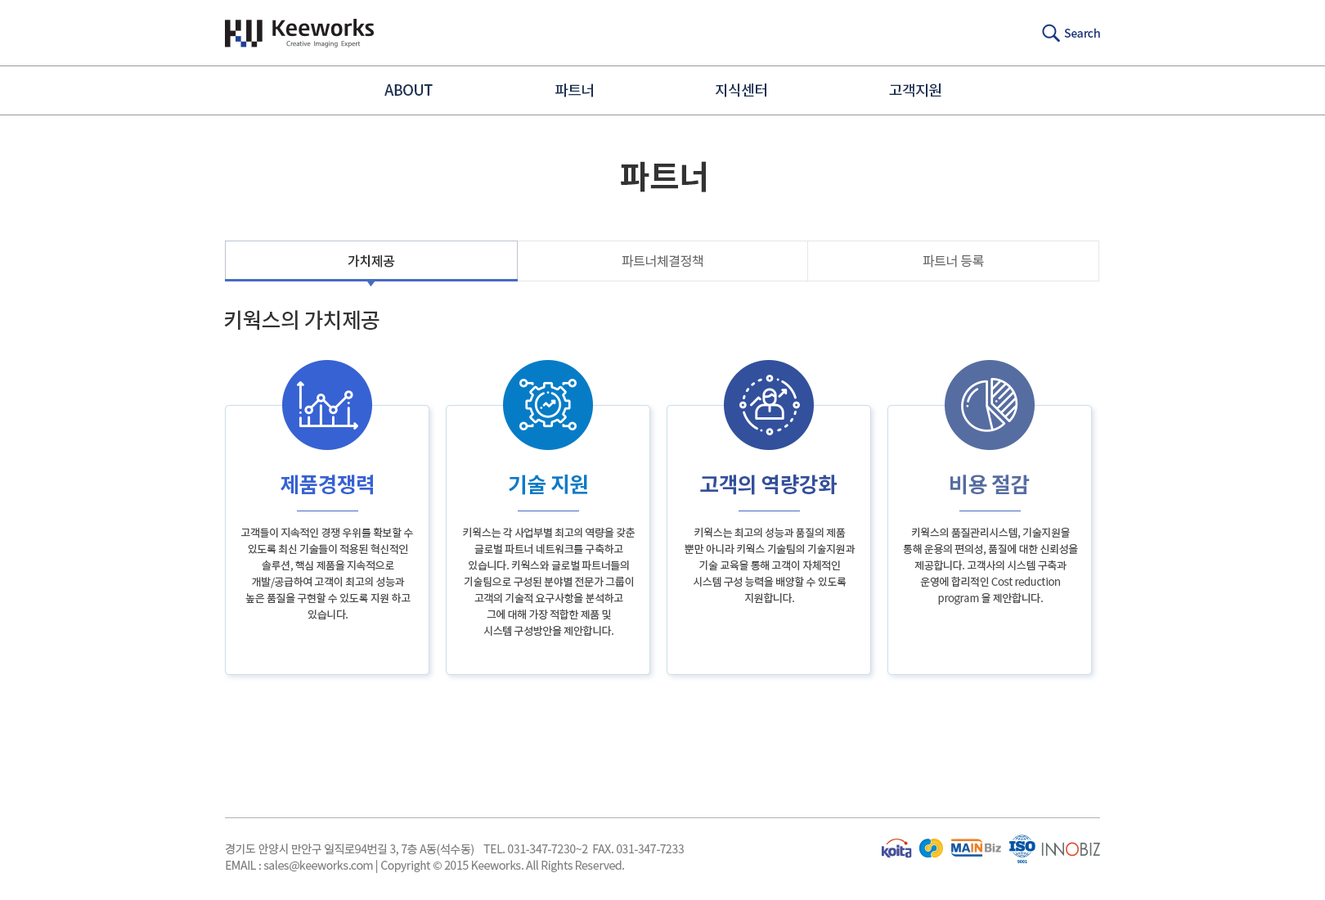
<style>
.page{position:relative;width:1325px;height:900px;background:#ffffff}
.page>*{position:absolute;margin:0}
.t1{font:11.5px "NotoSansCJKkr-Medium";letter-spacing:-0.025em;color:#1b3780}
.t2{font:14.7px "NotoSansCJKkr-Medium";letter-spacing:-0.025em;color:#1c3053;text-transform:uppercase}
.t3{font:32.7px "NotoSansCJKkr-Bold";letter-spacing:-0.025em;color:#333333}
.t4{font:13.1px "NotoSansCJKkr-Medium";letter-spacing:-0.025em;color:#333333}
.t5{font:13.1px "NotoSansCJKkr-DemiLight";letter-spacing:-0.025em;color:#666666}
.t6{font:21.3px "NotoSansCJKkr-Medium";letter-spacing:-0.025em;color:#333333}
.t7{font:21.3px "NotoSansCJKkr-Bold";letter-spacing:-0.025em;color:#3762d3}
.t8{font:21.3px "NotoSansCJKkr-Bold";letter-spacing:-0.025em;color:#067cc7}
.t9{font:21.3px "NotoSansCJKkr-Bold";letter-spacing:-0.025em;color:#33509c}
.t10{font:21.3px "NotoSansCJKkr-Bold";letter-spacing:-0.025em;color:#566da1}
.t11{font:10.6px/16.4px "NotoSansCJKkr-Regular";letter-spacing:-0.025em;color:#4d4d4d}
.t12{font:11.5px/16.4px "NotoSansCJKkr-Regular";letter-spacing:-0.025em;color:#808080}
</style>
<div class="page">
<p class="t1" style="left:1064px;top:28px;width:36px;height:10px">Search</p>
<p class="t2" style="left:384px;top:84px;width:49px;height:12px">ABOUT</p>
<p class="t2" style="left:555px;top:83px;width:38px;height:14px">파트너</p>
<p class="t2" style="left:715px;top:83px;width:51px;height:14px">지식센터</p>
<p class="t2" style="left:889px;top:83px;width:53px;height:14px">고객지원</p>
<p class="t3" style="left:621px;top:161px;width:85px;height:31px">파트너</p>
<p class="t4" style="left:348px;top:254px;width:47px;height:13px">가치제공</p>
<p class="t5" style="left:622px;top:254px;width:81px;height:13px">파트너체결정책</p>
<p class="t5" style="left:923px;top:254px;width:61px;height:13px">파트너 등록</p>
<p class="t6" style="left:224px;top:310px;width:156px;height:20px">키웍스의 가치제공</p>
<p class="t7" style="left:281px;top:474px;width:92px;height:21px">제품경쟁력</p>
<p class="t8" style="left:509px;top:474px;width:78px;height:21px">기술 지원</p>
<p class="t9" style="left:700px;top:474px;width:137px;height:21px">고객의 역량강화</p>
<p class="t10" style="left:951px;top:474px;width:79px;height:21px">비용 절감</p>
<p class="t11" style="left:240px;top:527px;width:173px;height:92px;text-align:center">고객들이 지속적인 경쟁 우위를 확보할 수 <br>있도록 최신 기술들이 적용된 혁신적인<br>솔루션, 핵심 제품을 지속적으로<br>개발/공급하여 고객이 최고의 성능과<br>높은 품질을 구현할 수 있도록 지원 하고<br>있습니다.</p>
<p class="t11" style="left:463px;top:527px;width:172px;height:109px;text-align:center">키웍스는 각 사업부별 최고의 역량을 갖춘<br>글로벌 파트너 네트워크를 구축하고<br>있습니다. 키웍스와 글로벌 파트너들의<br>기술팀으로 구성된 분야별 전문가 그룹이<br>고객의 기술적 요구사항을 분석하고<br>그에 대해 가장 적합한 제품 및<br>시스템 구성방안을 제안합니다.</p>
<p class="t11" style="left:685px;top:527px;width:171px;height:76px;text-align:center">키웍스는 최고의 성능과 품질의 제품<br>뿐만 아니라 키웍스 기술팀의 기술지원과<br>기술 교육을 통해 고객이 자체적인<br>시스템 구성 능력을 배양할 수 있도록<br>지원합니다.</p>
<p class="t11" style="left:903px;top:527px;width:175px;height:78px;text-align:center">키웍스의 품질관리시스템, 기술지원을<br>통해 운용의 편의성, 품질에 대한 신뢰성을<br>제공합니다. 고객사의 시스템 구축과<br>운영에 합리적인 Cost reduction<br>program 을 제안합니다.</p>
<p class="t12" style="left:226px;top:843px;width:458px;height:30px">경기도 안양시 만안구 일직로94번길 3, 7층 A동(석수동)    TEL. 031-347-7230~2  FAX. 031-347-7233<br>EMAIL : sales@keeworks.com | Copyright © 2015 Keeworks. All Rights Reserved.</p>
</div>
